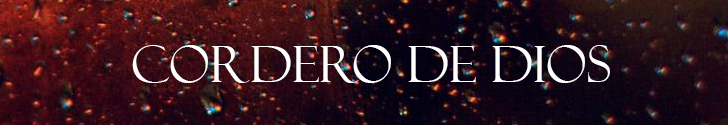
<style>
.page{position:relative;width:728px;height:125px}
.page>*{position:absolute;margin:0}
.t1{font:50px "FelixTitlingMT";color:#ffffff}
</style>
<div class="page">
<p class="t1" style="left:132px;top:45px;width:478px;height:38px">Cordero de Dios</p>
</div>
